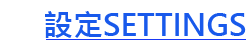
<style>
.page{position:relative;width:250px;height:50px;background:#ffffff}
.page>*{position:absolute;margin:0}
.t1{font:30px "MicrosoftJhengHeiBold";color:#1859eb}
</style>
<div class="page">
<p class="t1" style="left:45px;top:11px;width:201px;height:27px">設定SETTINGS</p>
</div>
